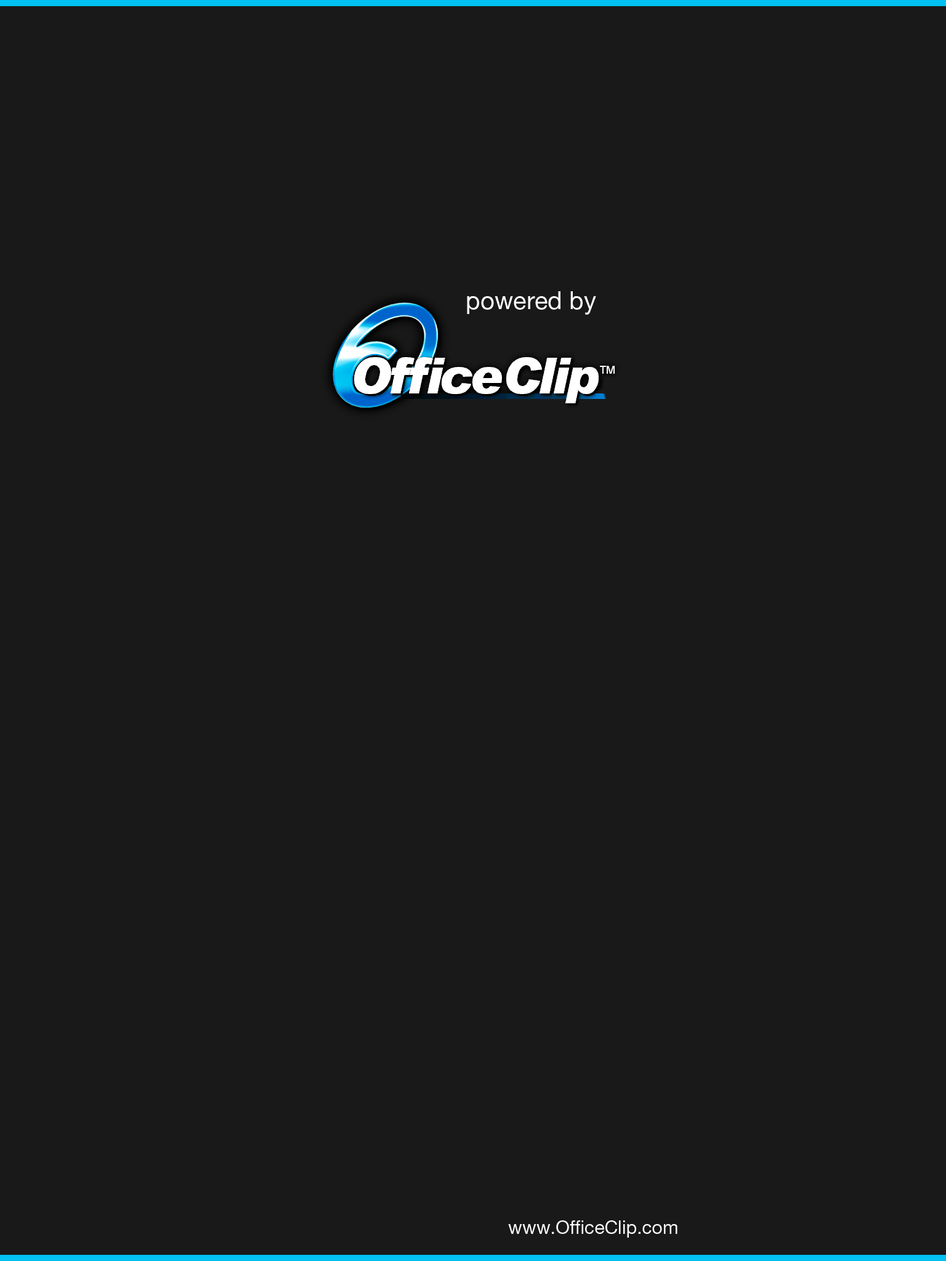
<style>
.page{position:relative;width:946px;height:1261px;background:#191919}
.page>*{position:absolute;margin:0}
.t1{font:24.6px "HelveticaNeueLTPro-Roman";color:#ffffff}
.t2{font:18.5px "HelveticaNeueLTPro-Roman";color:#ffffff}
</style>
<div class="page">
<p class="t1" style="left:467px;top:291px;width:129px;height:24px">powered by</p>
<p class="t2" style="left:508px;top:1220px;width:169px;height:18px">www.OfficeClip.com</p>
</div>
